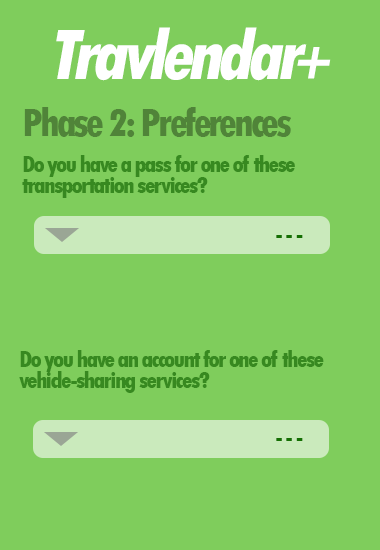
<style>
.page{position:relative;width:380px;height:550px;background:#7fcd5c}
.page>*{position:absolute;margin:0}
.t1{font:75px "TwCenMT-CondensedExtraBold";letter-spacing:-0.075em;color:#ffffff;font-style:italic}
.t2{font:58.3px "TwCenMT-CondensedExtraBold";letter-spacing:-0.075em;color:#ffffff;font-style:italic}
.t3{font:41.7px "TwCenMT-CondensedExtraBold";letter-spacing:-0.075em;color:#508439}
.t4{font:25px/20.8px "TwCenMT-CondensedExtraBold";letter-spacing:-0.075em;color:#378920}
.t5{font:25px "TwCenMT-CondensedExtraBold";letter-spacing:-0.075em;color:#147002}
</style>
<div class="page">
<p class="t1" style="left:56px;top:27px;width:251px;height:54px">Travlendar</p>
<p class="t2" style="left:297px;top:47px;width:34px;height:32px">+</p>
<p class="t3" style="left:24px;top:107px;width:267px;height:30px">Phase 2: Preferences</p>
<p class="t4" style="left:22px;top:155px;width:273px;height:43px">Do you have a pass for one of these<br>transportation services?</p>
<p class="t5" style="left:276px;top:235px;width:27px;height:3px">- - -</p>
<p class="t4" style="left:19px;top:350px;width:305px;height:43px">Do you have an account for one of these<br>vehicle-sharing services?</p>
<p class="t5" style="left:276px;top:438px;width:27px;height:3px">- - -</p>
</div>
